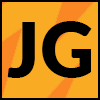
<style>
.page{position:relative;width:100px;height:100px;background:#f9ab24}
.page>*{position:absolute;margin:0}
.t1{font:74.9px "Lato-Black";color:#000000}
</style>
<div class="page">
<p class="t1" style="left:7px;top:21px;width:85px;height:57px">JG</p>
</div>
